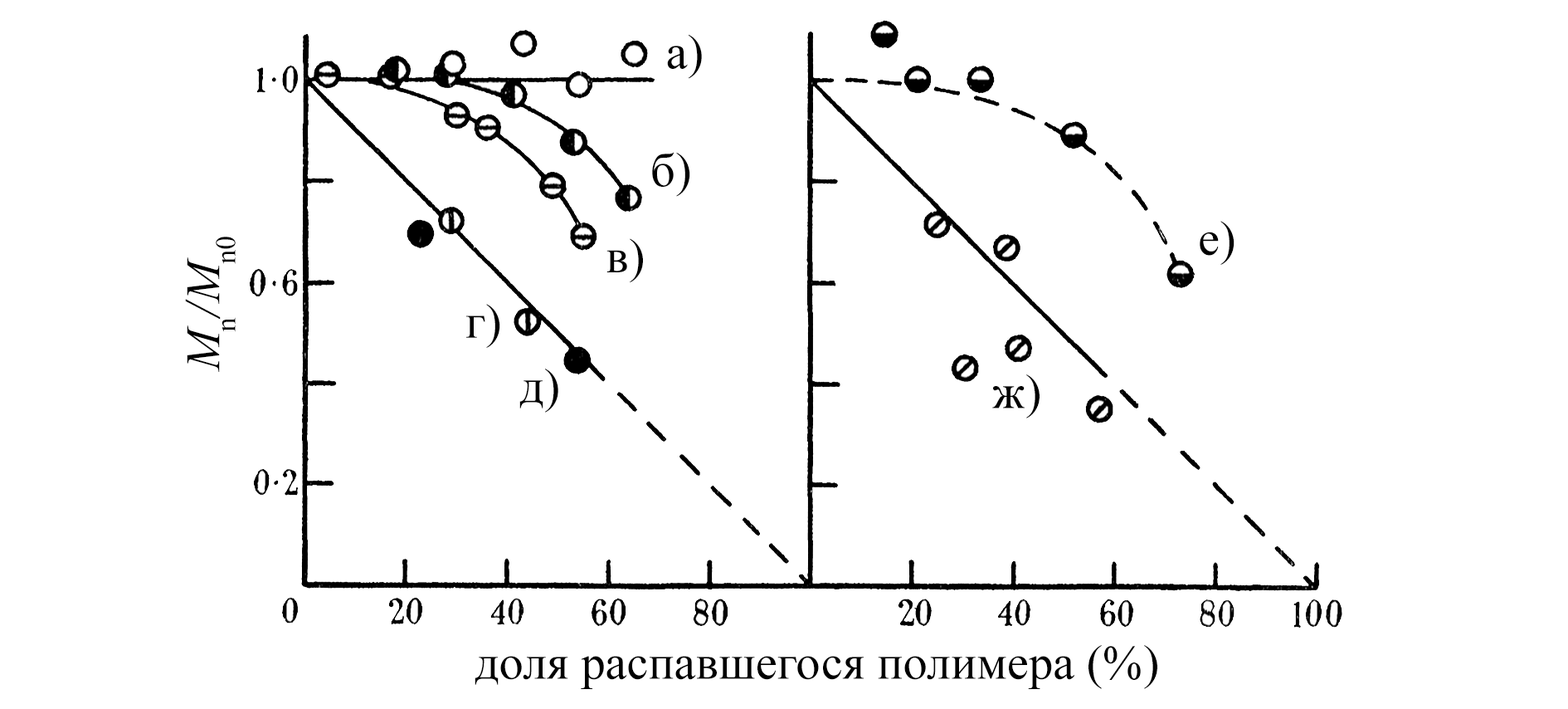
<style>
.page{position:relative;width:1568px;height:709px;background:#ffffff}
.page>*{position:absolute;margin:0}
.t1{font:48.4px "TimesNewRomanPSMT";color:#000000}
.t2{font:48.4px "TimesNewRomanPS-ItalicMT";color:#000000}
</style>
<div class="page">
<p class="t1" style="left:667px;top:34px;width:35px;height:45px">a)</p>
<p class="t1" style="left:652px;top:152px;width:38px;height:45px">б)</p>
<p class="t1" style="left:1200px;top:221px;width:34px;height:44px">е)</p>
<p class="t2" style="left:185px;top:236px;width:51px;height:136px;rotate:-90deg">M<span class="t1">n</span>/M<span class="t1">n0</span></p>
<p class="t1" style="left:606px;top:238px;width:37px;height:45px">в)</p>
<p class="t1" style="left:466px;top:304px;width:34px;height:44px">г)</p>
<p class="t1" style="left:519px;top:368px;width:39px;height:44px">д)</p>
<p class="t1" style="left:992px;top:374px;width:48px;height:44px">ж)</p>
<p class="t1" style="left:475px;top:645px;width:682px;height:44px">доля распавшегося полимера (%)</p>
</div>
